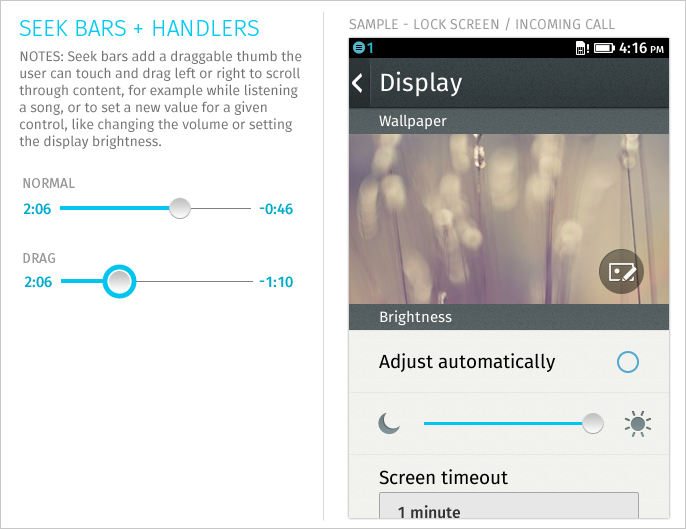
<style>
.page{position:relative;width:686px;height:529px;background:#ffffff}
.page>*{position:absolute;margin:0}
.t1{font:14px "Moz";color:#9a9898;text-transform:uppercase}
.t2{font:22.9px "MozLight";color:#00caf2;text-transform:uppercase}
.t3{font:13.7px/17px "Moz";color:#747474}
.t4{font:13.7px/30px "Moz";color:#747474;text-transform:uppercase}
.t5{font:13.8px "Moz";color:#9a9898;text-transform:uppercase}
.t6{font:14.9px "MozMedium";color:#00aacb}
</style>
<div class="page">
<p class="t1" style="left:349px;top:17px;width:266px;height:14px">Sample - Lock Screen / incoming call</p>
<p class="t2" style="left:19px;top:20px;width:240px;height:16px">seek bars + handlers</p>
<p class="t3" style="left:19px;top:50px;width:283px;height:99px"><span class="t4">Notes: </span>Seek bars add a draggable thumb the user can touch and drag left or right to scroll through content, for example while listening a song, or to set a new value for a given control, like changing the volume or setting the display brightness.</p>
<p class="t5" style="left:23px;top:178px;width:52px;height:10px">NORMAL</p>
<p class="t6" style="left:23px;top:203px;width:28px;height:12px">2:06</p>
<p class="t6" style="left:259px;top:203px;width:34px;height:12px">-0:46</p>
<p class="t5" style="left:23px;top:253px;width:32px;height:10px">DRAG</p>
<p class="t6" style="left:24px;top:276px;width:28px;height:12px">2:06</p>
<p class="t6" style="left:259px;top:276px;width:34px;height:12px">-1:10</p>
</div>
